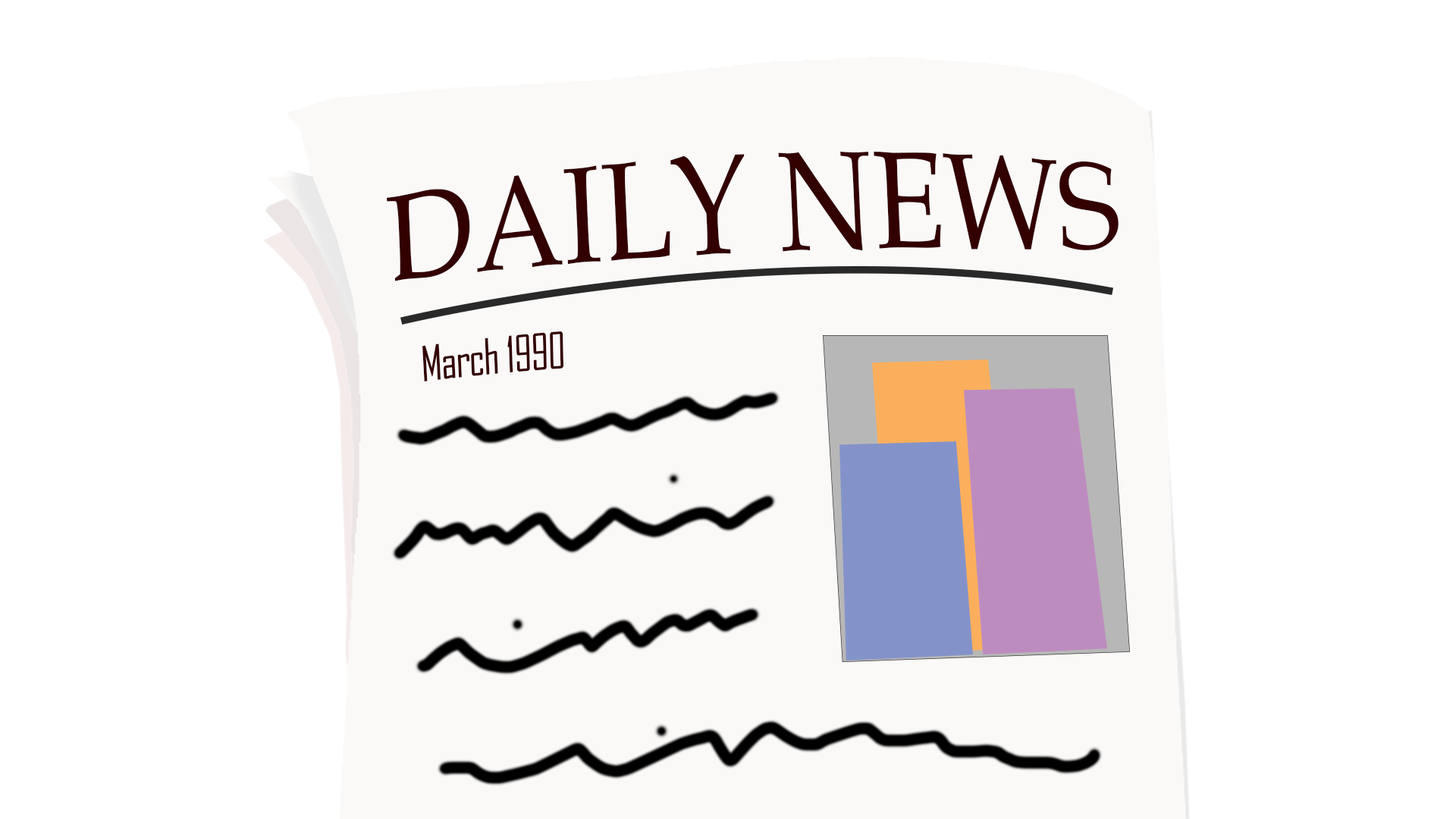
<style>
.page{position:relative;width:1456px;height:819px;background:#ffffff}
.page>*{position:absolute;margin:0}
.t1{font:115px "BookAntiqua";color:#330000}
.t2{font:37.9px "AgencyFB-Reg";color:#330000}
</style>
<div class="page">
<p class="t1" style="left:387px;top:152px;width:732px;height:129px;rotate:-3deg">DAILY NEWS</p>
<p class="t2" style="left:422px;top:331px;width:141px;height:50px;rotate:-3deg">March 1990</p>
</div>
